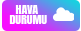
<style>
.page{position:relative;width:81px;height:31px;background:#ffffff}
.page>*{position:absolute;margin:0}
.t1{font:9.7px/9.3px "Anton-Regular";color:#ffffff;scale:1.23 1}
</style>
<div class="page">
<p class="t1" style="left:9px;top:5px;width:38px;height:19px;text-align:center">HAVA <br>DURUMU</p>
</div>
